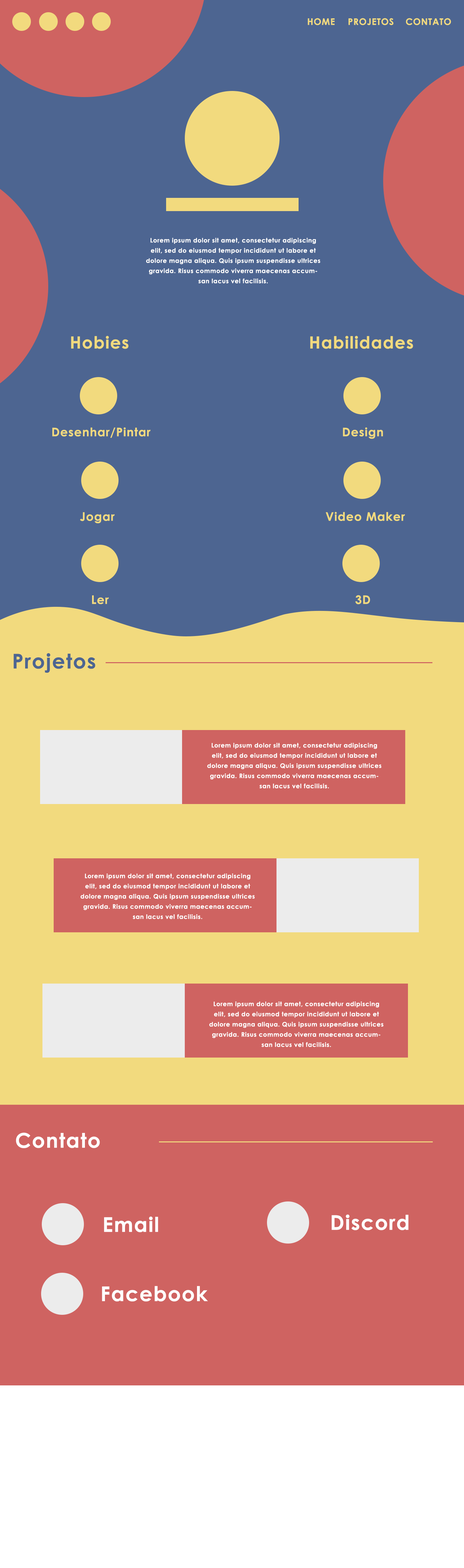
<style>
.page{position:relative;width:464px;height:1568px;background:#4d6591}
.page>*{position:absolute;margin:0}
.t1{font:9px "CenturyGothic-Bold";letter-spacing:0.045em;color:#f2da7e}
.t2{font:6.2px/10.2px "CenturyGothic-Bold";letter-spacing:0.045em;color:#ffffff}
.t3{font:16.8px "CenturyGothic-Bold";letter-spacing:0.045em;color:#f2da7e}
.t4{font:11.8px "CenturyGothic-Bold";letter-spacing:0.045em;color:#f2da7e}
.t5{font:20.4px "CenturyGothic-Bold";letter-spacing:0.045em;color:#4d6591}
.t6{font:20.4px "CenturyGothic-Bold";letter-spacing:0.045em;color:#ffffff}
</style>
<div class="page">
<p class="t1" style="left:307px;top:18px;width:27px;height:7px">HOME</p>
<p class="t1" style="left:348px;top:18px;width:45px;height:7px">PROJETOS</p>
<p class="t1" style="left:406px;top:18px;width:45px;height:7px">CONTATO</p>
<p class="t2" style="left:146px;top:238px;width:174px;height:45px;text-align:center">Lorem ipsum dolor sit amet, consectetur adipiscing elit, sed do eiusmod tempor incididunt ut labore et dolore magna aliqua. Quis ipsum suspendisse ultrices gravida. Risus commodo viverra maecenas accumsan lacus vel facilisis.</p>
<p class="t3" style="left:71px;top:336px;width:57px;height:13px">Hobies</p>
<p class="t3" style="left:310px;top:336px;width:103px;height:13px">Habilidades</p>
<p class="t4" style="left:52px;top:427px;width:99px;height:11px">Desenhar/Pintar</p>
<p class="t4" style="left:342px;top:427px;width:41px;height:12px">Design</p>
<p class="t4" style="left:80px;top:512px;width:35px;height:11px">Jogar</p>
<p class="t4" style="left:325px;top:512px;width:80px;height:9px">Video Maker</p>
<p class="t4" style="left:92px;top:595px;width:17px;height:9px">Ler</p>
<p class="t4" style="left:355px;top:595px;width:15px;height:9px">3D</p>
<p class="t5" style="left:14px;top:653px;width:81px;height:20px">Projetos</p>
<p class="t2" style="left:207px;top:743px;width:174px;height:45px;text-align:center">Lorem ipsum dolor sit amet, consectetur adipiscing elit, sed do eiusmod tempor incididunt ut labore et dolore magna aliqua. Quis ipsum suspendisse ultrices gravida. Risus commodo viverra maecenas accumsan lacus vel facilisis.</p>
<p class="t2" style="left:80px;top:873px;width:175px;height:46px;text-align:center">Lorem ipsum dolor sit amet, consectetur adipiscing elit, sed do eiusmod tempor incididunt ut labore et dolore magna aliqua. Quis ipsum suspendisse ultrices gravida. Risus commodo viverra maecenas accumsan lacus vel facilisis.</p>
<p class="t2" style="left:209px;top:1001px;width:174px;height:46px;text-align:center">Lorem ipsum dolor sit amet, consectetur adipiscing elit, sed do eiusmod tempor incididunt ut labore et dolore magna aliqua. Quis ipsum suspendisse ultrices gravida. Risus commodo viverra maecenas accumsan lacus vel facilisis.</p>
<p class="t6" style="left:16px;top:1133px;width:84px;height:15px">Contato</p>
<p class="t6" style="left:104px;top:1216px;width:54px;height:16px">Email</p>
<p class="t6" style="left:331px;top:1214px;width:77px;height:16px">Discord</p>
<p class="t6" style="left:102px;top:1286px;width:106px;height:16px">Facebook</p>
</div>
